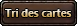
<style>
.page{position:relative;width:78px;height:26px}
.page>*{position:absolute;margin:0}
.t1{font:10.7px "LaoUI-Bold"}
</style>
<div class="page">
<p class="t1" style="left:5px;top:9px;width:67px;height:8px">Tri des cartes</p>
</div>
